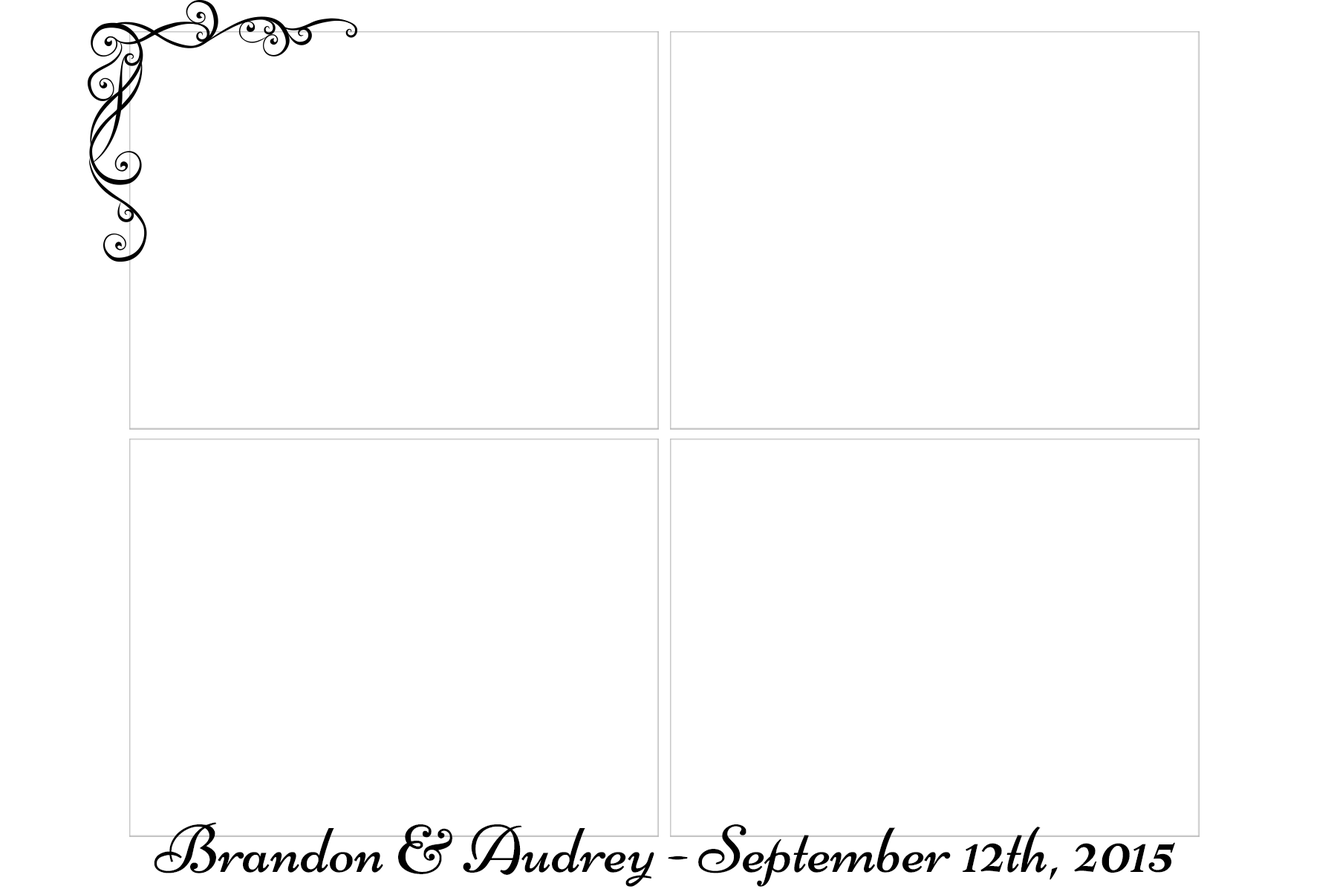
<style>
.page{position:relative;width:1337px;height:892px;background:#ffffff}
.page>*{position:absolute;margin:0}
.t1{font:67.7px "Niconne-Regular";color:#000000}
</style>
<div class="page">
<p class="t1" style="left:154px;top:822px;width:1021px;height:64px">Brandon &amp; Audrey - September 12th, 2015</p>
</div>
